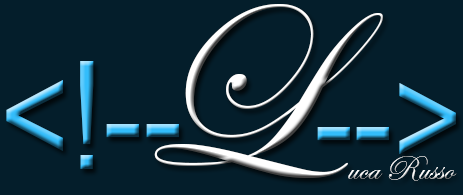
<style>
.page{position:relative;width:463px;height:195px;background:#041e2b}
.page>*{position:absolute;margin:0}
.t1{font:240px "EdwardianScriptITC"}
.t2{font:149.7px "ArialMT";scale:0.8 1}
.t3{font:35px "EdwardianScriptITC"}
</style>
<div class="page">
<p class="t1" style="left:154px;top:4px;width:229px;height:174px">L</p>
<p class="t2" style="left:6px;top:61px;width:173px;height:108px">&lt;!--</p>
<p class="t2" style="left:317px;top:83px;width:139px;height:71px">--&gt;</p>
<p class="t3" style="left:348px;top:156px;width:109px;height:25px">uca Russo</p>
</div>
